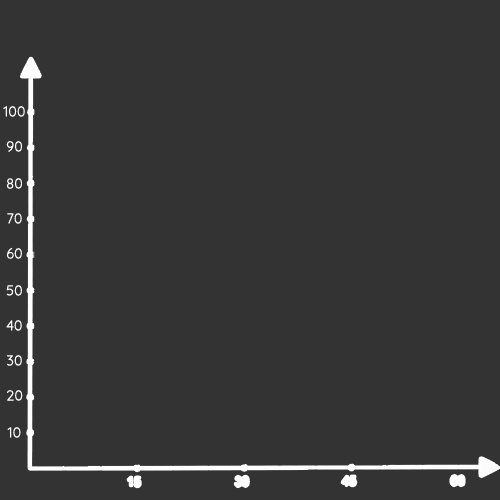
<style>
.page{position:relative;width:500px;height:500px;background:#333333}
.page>*{position:absolute;margin:0}
.t1{font:14px "Quicksand-Light";color:#ffffff;font-variant:small-caps;font-weight:bold}
</style>
<div class="page">
<p class="t1" style="left:3px;top:106px;width:22px;height:11px">100</p>
<p class="t1" style="left:6px;top:141px;width:16px;height:11px">90</p>
<p class="t1" style="left:7px;top:178px;width:15px;height:11px">80</p>
<p class="t1" style="left:7px;top:213px;width:15px;height:11px">70</p>
<p class="t1" style="left:7px;top:247px;width:15px;height:12px">60</p>
<p class="t1" style="left:6px;top:285px;width:16px;height:11px">50</p>
<p class="t1" style="left:6px;top:320px;width:16px;height:11px">40</p>
<p class="t1" style="left:7px;top:355px;width:15px;height:11px">30</p>
<p class="t1" style="left:7px;top:390px;width:16px;height:11px">20</p>
<p class="t1" style="left:7px;top:427px;width:14px;height:11px">10</p>
</div>
